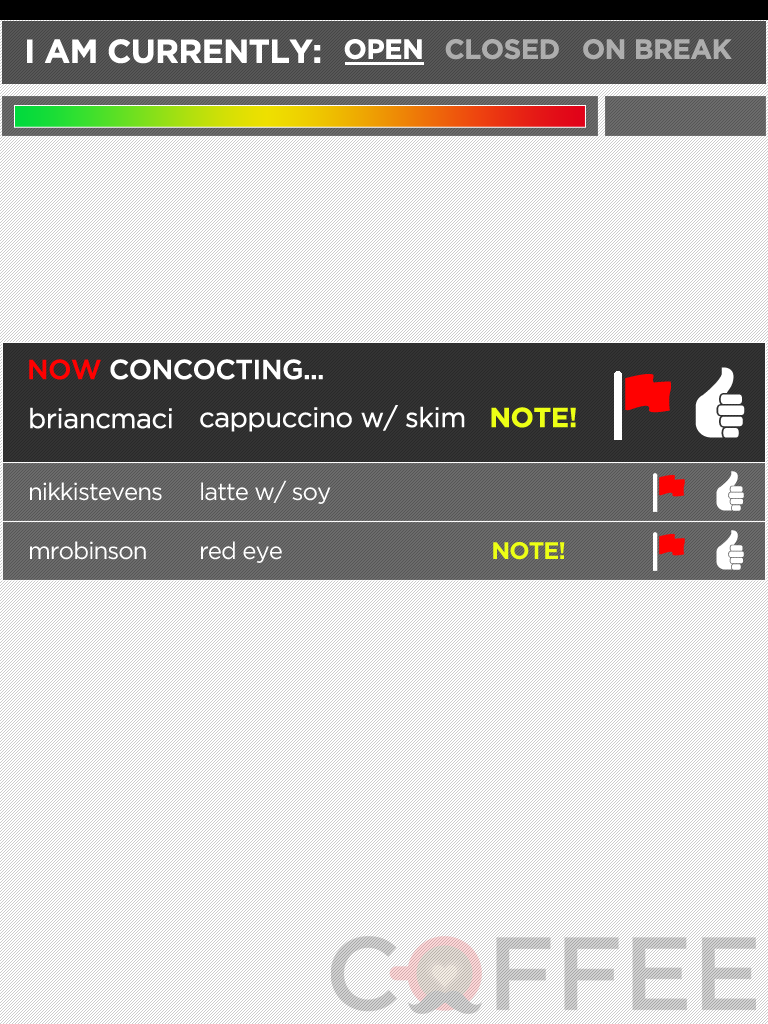
<style>
.page{position:relative;width:768px;height:1024px;background:#ffffff}
.page>*{position:absolute;margin:0}
.t1{font:32.8px "Gotham-Bold";letter-spacing:-0.04em;color:#ffffff;text-transform:uppercase;font-weight:bold}
.t2{font:27.3px "Gotham-Bold";letter-spacing:-0.04em;color:#ffffff;text-transform:uppercase;font-weight:bold}
.t3{font:27.3px "Gotham-Bold";letter-spacing:-0.04em;color:#b0b0b0;text-transform:uppercase;font-weight:bold}
.t4{font:27.3px "Gotham-Medium";letter-spacing:-0.04em;color:#ffffff;text-transform:uppercase;font-weight:bold}
.t5{font:27.3px "Gotham-Medium";letter-spacing:-0.04em;color:#ff0101;text-transform:uppercase;font-weight:bold}
.t6{font:27.3px "Gotham-Book";letter-spacing:-0.04em;color:#ffffff;font-weight:bold}
.t7{font:27.3px "Gotham-Bold";letter-spacing:-0.04em;color:#ecff15;font-weight:bold}
.t8{font:24px "Gotham-Book";letter-spacing:-0.04em;color:#ffffff}
.t9{font:24px "Gotham-Bold";letter-spacing:-0.04em;color:#ecff15}
</style>
<div class="page">
<p class="t1" style="left:27px;top:39px;width:294px;height:25px">I AM CURRENTLY:</p>
<p class="t2" style="left:344px;top:39px;width:78px;height:21px">OPEN</p>
<p class="t3" style="left:445px;top:39px;width:114px;height:21px">CLOSED</p>
<p class="t3" style="left:583px;top:39px;width:149px;height:21px">ON BREAK</p>
<p class="t4" style="left:29px;top:359px;width:294px;height:21px"><span class="t5">NOW</span> CONCOCTING...</p>
<p class="t6" style="left:30px;top:407px;width:142px;height:22px">briancmaci</p>
<p class="t6" style="left:200px;top:405px;width:376px;height:27px">cappuccino w/ skim   <span class="t7">NOTE!</span></p>
<p class="t8" style="left:30px;top:482px;width:132px;height:19px">nikkistevens</p>
<p class="t8" style="left:201px;top:480px;width:130px;height:24px">latte w/ soy</p>
<p class="t8" style="left:30px;top:541px;width:116px;height:19px">mrobinson</p>
<p class="t8" style="left:201px;top:541px;width:364px;height:22px">red eye                                  <span class="t9">NOTE!</span></p>
</div>
